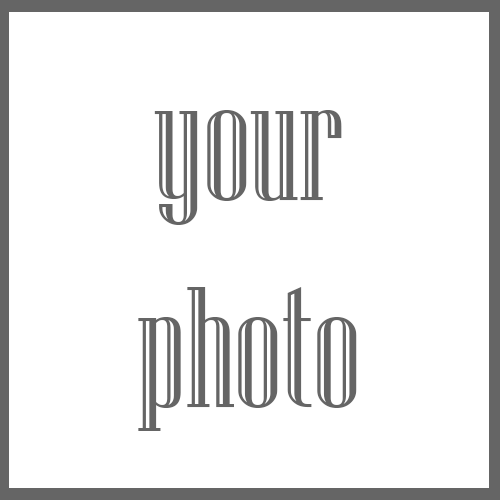
<style>
.page{position:relative;width:500px;height:500px;background:#ffffff}
.page>*{position:absolute;margin:0}
.t1{font:172px "NiagaraEngraved-Reg";color:#656565}
</style>
<div class="page">
<p class="t1" style="left:138px;top:110px;width:219px;height:321px;text-align:center">your <br>photo</p>
</div>
